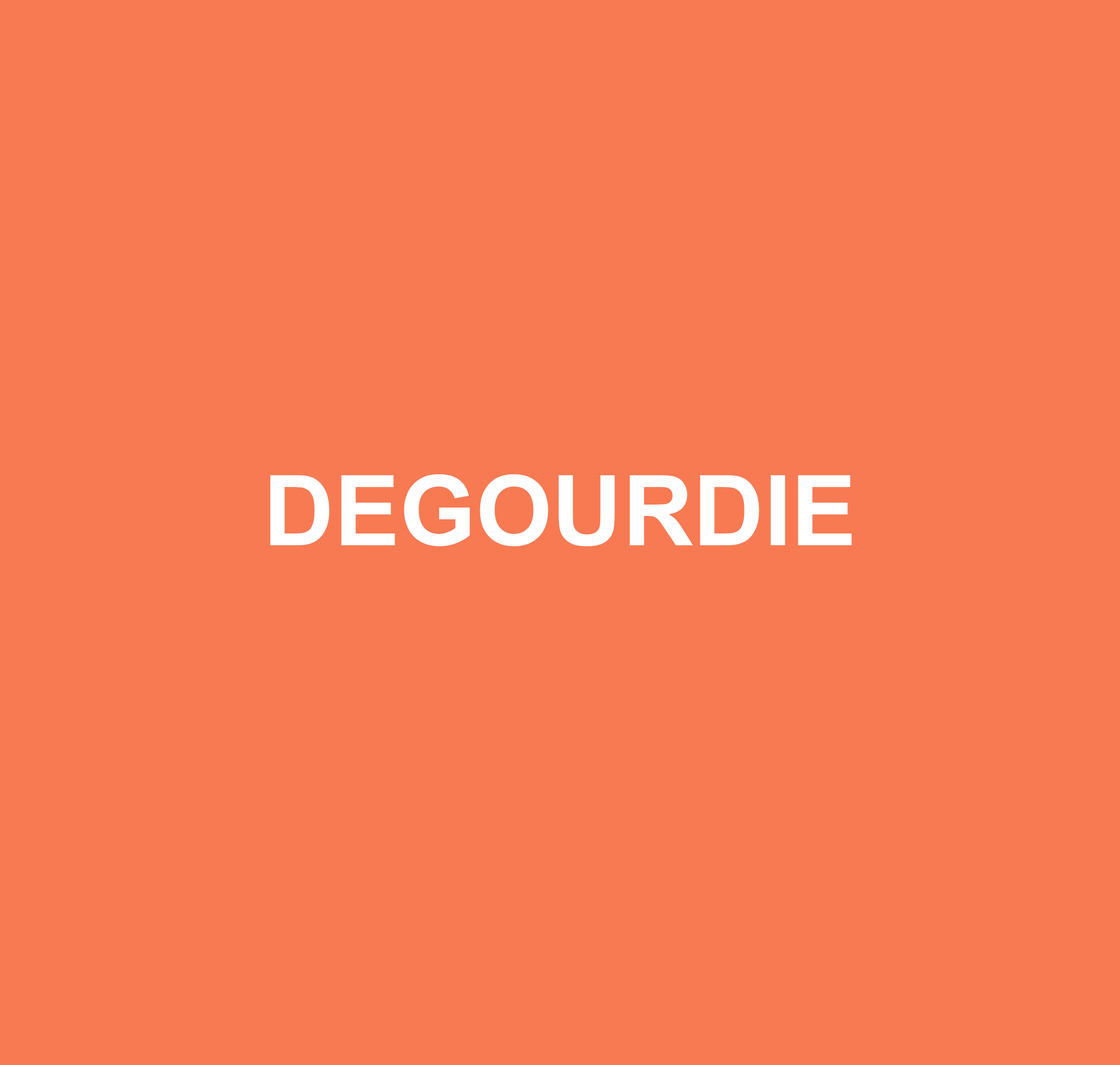
<style>
.page{position:relative;width:1120px;height:1065px;background:#f77a52}
.page>*{position:absolute;margin:0}
.t1{font:98px "Arial-BoldMT";color:#ffffff}
</style>
<div class="page">
<p class="t1" style="left:270px;top:474px;width:582px;height:72px">DEGOURDIE</p>
</div>
